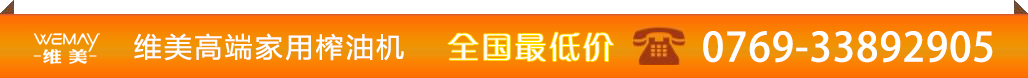
<style>
.page{position:relative;width:1028px;height:78px}
.page>*{position:absolute;margin:0}
.t1{font:27px "YaHei-Consolas-Hybrid";letter-spacing:0.1em;color:#fefefe}
.t2{font:30px "GJJZQJW--GB1-0";letter-spacing:0.1em;color:#fefefe}
.t3{font:40px "AdobeFanHeitiStd-Bold";letter-spacing:0.025em;color:#fefefe}
</style>
<div class="page">
<p class="t1" style="left:134px;top:33px;width:270px;height:28px">维美高端家用榨油机</p>
<p class="t2" style="left:448px;top:32px;width:166px;height:29px">全国最低价</p>
<p class="t3" style="left:703px;top:31px;width:290px;height:32px">0769-33892905</p>
</div>
